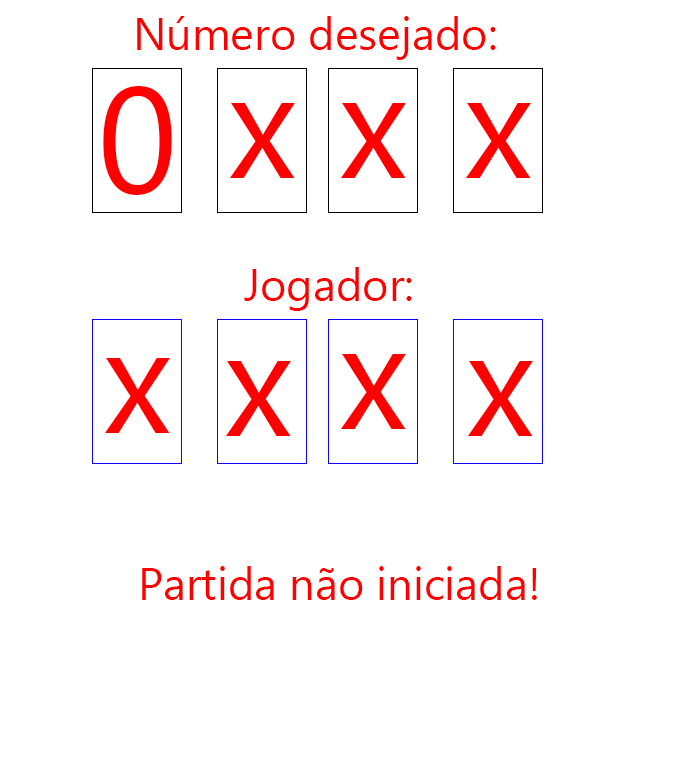
<style>
.page{position:relative;width:676px;height:783px;background:#ffffff}
.page>*{position:absolute;margin:0}
.t1{font:45px "MicrosoftTaiLe";color:#ff0000}
.t2{font:150px "MicrosoftTaiLe";color:#ff0000}
</style>
<div class="page">
<p class="t1" style="left:137px;top:16px;width:359px;height:44px">Número desejado:</p>
<p class="t2" style="left:103px;top:86px;width:69px;height:109px">0</p>
<p class="t2" style="left:229px;top:103px;width:66px;height:75px">x</p>
<p class="t2" style="left:340px;top:103px;width:66px;height:75px">x</p>
<p class="t2" style="left:465px;top:103px;width:66px;height:75px">x</p>
<p class="t1" style="left:244px;top:267px;width:168px;height:44px">Jogador:</p>
<p class="t2" style="left:104px;top:358px;width:66px;height:75px">x</p>
<p class="t2" style="left:225px;top:361px;width:66px;height:75px">x</p>
<p class="t2" style="left:340px;top:354px;width:66px;height:75px">x</p>
<p class="t2" style="left:467px;top:361px;width:66px;height:75px">x</p>
<p class="t1" style="left:142px;top:566px;width:395px;height:34px">Partida não iniciada!</p>
</div>
